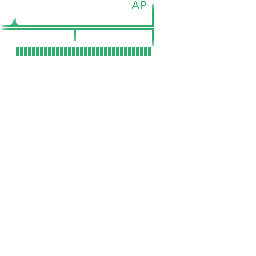
<style>
.page{position:relative;width:256px;height:256px;background:#ffffff}
.page>*{position:absolute;margin:0}
.t1{font:11px "ArialMT";letter-spacing:0.1em;color:#2ead6d}
</style>
<div class="page">
<p class="t1" style="left:132px;top:1px;width:14px;height:8px">AP</p>
</div>
